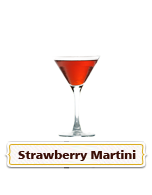
<style>
.page{position:relative;width:152px;height:195px;background:#ffffff}
.page>*{position:absolute;margin:0}
.t1{font:11.4px "Humanist777BT-BlackB";color:#3a0f07;scale:1.05 1}
</style>
<div class="page">
<p class="t1" style="left:18px;top:150px;width:118px;height:11px">Strawberry Martini</p>
</div>
